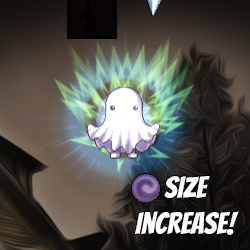
<style>
.page{position:relative;width:250px;height:250px}
.page>*{position:absolute;margin:0}
.t1{font:30px "Bangers-Regular";color:#ffffff}
</style>
<div class="page">
<p class="t1" style="left:134px;top:176px;width:105px;height:59px;text-align:center">Size<br>increase!</p>
</div>
